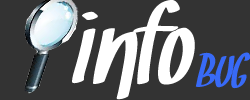
<style>
.page{position:relative;width:250px;height:100px;background:#333333}
.page>*{position:absolute;margin:0}
.t1{font:111.1px "Snickles";color:#ffffff}
.t2{font:50px "Snickles";color:#386af7}
</style>
<div class="page">
<p class="t1" style="left:72px;top:0px;width:178px;height:100px">info<span class="t2">BUG</span></p>
</div>
